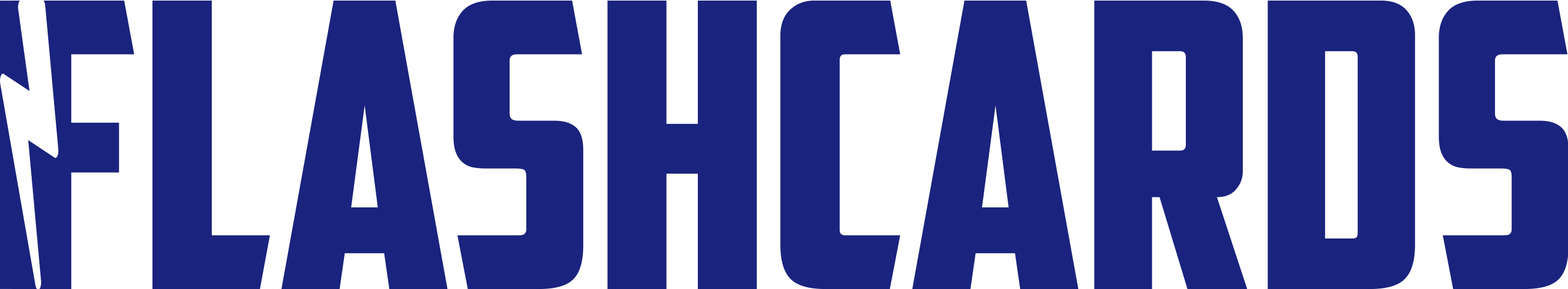
<style>
.page{position:relative;width:1568px;height:289px;background:#1a237e}
.page>*{position:absolute;margin:0}
.t1{font:398.1px "AmericanCaptain";color:#1a237e}
</style>
<div class="page">
<p class="t1" style="left:12px;top:1px;width:1557px;height:288px">Flashcards</p>
</div>
